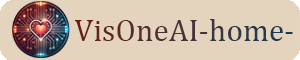
<style>
.page{position:relative;width:300px;height:60px;background:#e5d4bd}
.page>*{position:absolute;margin:0}
.t1{font:31.3px "CambriaMath"}
</style>
<div class="page">
<p class="t1" style="left:74px;top:19px;width:219px;height:22px">VisOneAI-home-</p>
</div>
